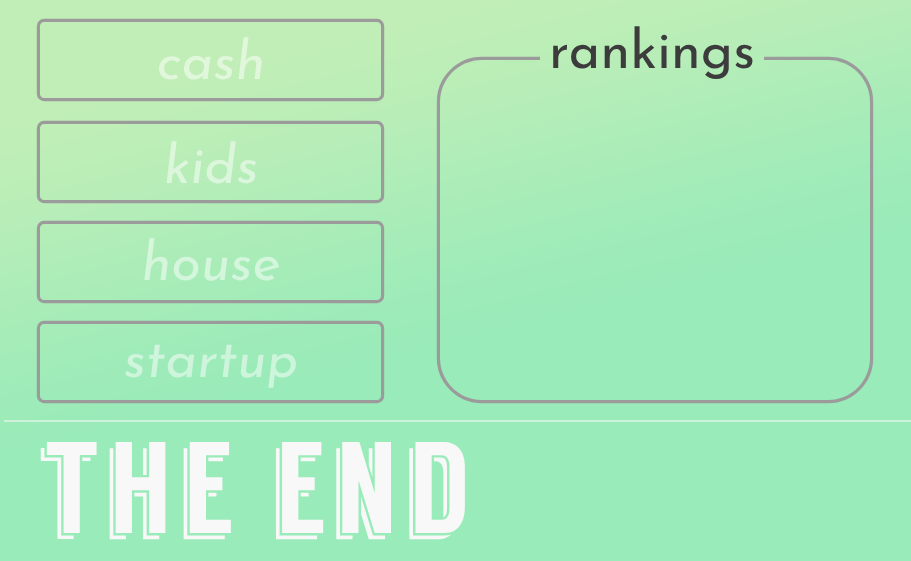
<style>
.page{position:relative;width:911px;height:561px;background:#99ebb9}
.page>*{position:absolute;margin:0}
.t1{font:54px "JosefinSans-Regular";color:#3c3c3c}
.t2{font:54px "JosefinSans-Italic";color:#e0f7db}
.t3{font:54px "JosefinSans-Italic";color:#dbf6db}
.t4{font:54px "JosefinSans-Italic";color:#d4f6dc}
.t5{font:54px "JosefinSans-Italic";color:#cef5dc}
.t6{font:130px "Langdon";letter-spacing:0.061em;color:#f8f8f8}
</style>
<div class="page">
<p class="t1" style="left:553px;top:26px;width:200px;height:54px">rankings</p>
<p class="t2" style="left:158px;top:37px;width:104px;height:43px">cash</p>
<p class="t3" style="left:166px;top:141px;width:91px;height:43px">kids</p>
<p class="t4" style="left:144px;top:238px;width:135px;height:43px">house</p>
<p class="t5" style="left:125px;top:344px;width:171px;height:44px">startup</p>
<p class="t6" style="left:40px;top:442px;width:425px;height:98px">the end</p>
</div>
